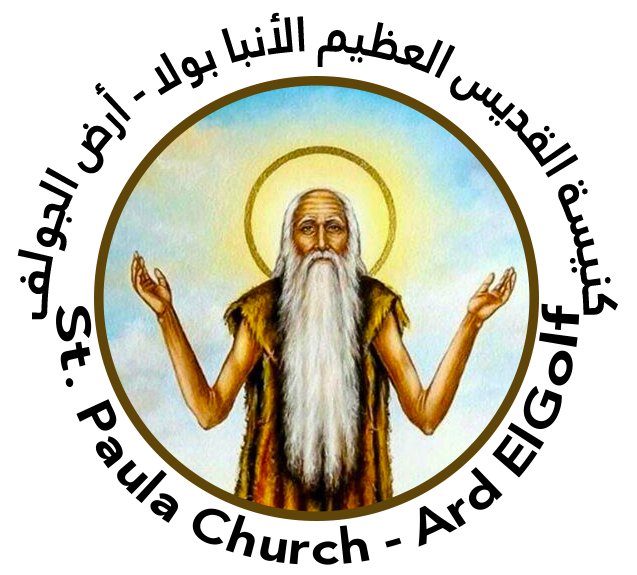
<style>
.page{position:relative;width:637px;height:575px;background:#ffffff}
.page>*{position:absolute;margin:0}
.t1{font:48px "AJannatLT-Bold";color:#000000;scale:0.53 1}
.t2{font:49.8px "AJannatLT-Bold";color:#000000;scale:0.67 1}
</style>
<div class="page">
<p class="t1" style="left:17px;top:12px;width:601px;height:308px">كنيسة القديس العظيم الأنبا بولا - أرض الجولف</p>
<p class="t2" style="left:56px;top:303px;width:524px;height:262px">St. Paula Church - Ard ElGolf</p>
</div>
